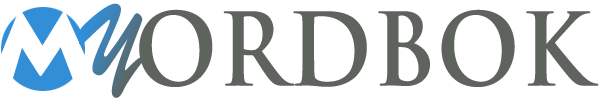
<style>
.page{position:relative;width:600px;height:103px;background:#ffffff}
.page>*{position:absolute;margin:0}
.t1{font:98.5px "BrushScriptStd";text-transform:uppercase;font-weight:bold;scale:0.9 1}
.t2{font:98.5px "TrajanPro-Bold";color:#676766;text-transform:uppercase;font-weight:bold;scale:0.9 1}
</style>
<div class="page">
<p class="t1" style="left:79px;top:3px;width:65px;height:95px;rotate:-12deg">y</p>
<p class="t2" style="left:139px;top:9px;width:460px;height:78px">Ordbok</p>
</div>
